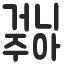
<style>
.page{position:relative;width:64px;height:64px;background:#ffffff}
.page>*{position:absolute;margin:0}
.t1{font:35.1px/30.1px "BMJUAOTF";letter-spacing:0.05em;color:#282628}
</style>
<div class="page">
<p class="t1" style="left:2px;top:2px;width:59px;height:60px;text-align:center">거니<br>주아</p>
</div>
